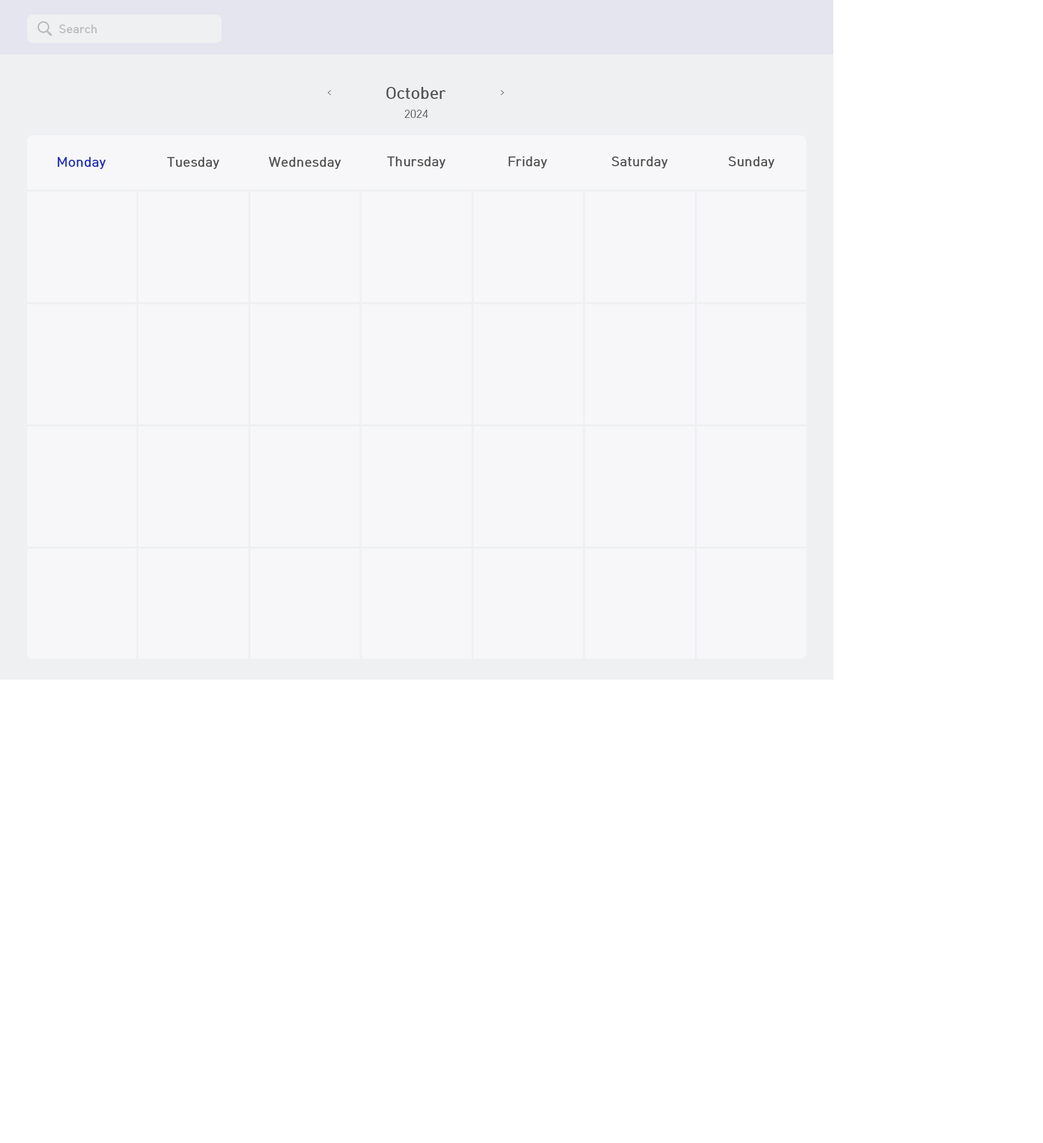
<style>
.page{position:relative;width:1043px;height:1143px;background:#ffffff}
.page>*{position:absolute;margin:0}
.t1{font:11.8px "HCRDotum-Bold";color:#bbbcbe}
.t2{font:16.3px "HCRDotum-Bold";color:#555555}
.t3{font:7.1px "HCRDotum";color:#555555}
.t4{font:10.9px "HCRDotum";color:#555555}
.t5{font:13.6px "HCRDotum-Bold";color:#2532b4}
.t6{font:13.6px "HCRDotum-Bold";color:#555555}
</style>
<div class="page">
<p class="t1" style="left:59px;top:24px;width:38px;height:9px">Search</p>
<p class="t2" style="left:386px;top:87px;width:60px;height:12px">October</p>
<p class="t3" style="left:328px;top:90px;width:3px;height:5px">&lt;</p>
<p class="t3" style="left:500px;top:90px;width:4px;height:5px;rotate:180deg">&lt;</p>
<p class="t4" style="left:405px;top:110px;width:23px;height:8px">2024</p>
<p class="t5" style="left:58px;top:157px;width:48px;height:12px">Monday</p>
<p class="t6" style="left:167px;top:157px;width:52px;height:12px">Tuesday</p>
<p class="t6" style="left:268px;top:157px;width:73px;height:12px">Wednesday</p>
<p class="t6" style="left:387px;top:156px;width:59px;height:12px">Thursday</p>
<p class="t6" style="left:509px;top:156px;width:39px;height:12px">Friday</p>
<p class="t6" style="left:612px;top:156px;width:56px;height:12px">Saturday</p>
<p class="t6" style="left:729px;top:156px;width:46px;height:12px">Sunday</p>
</div>
